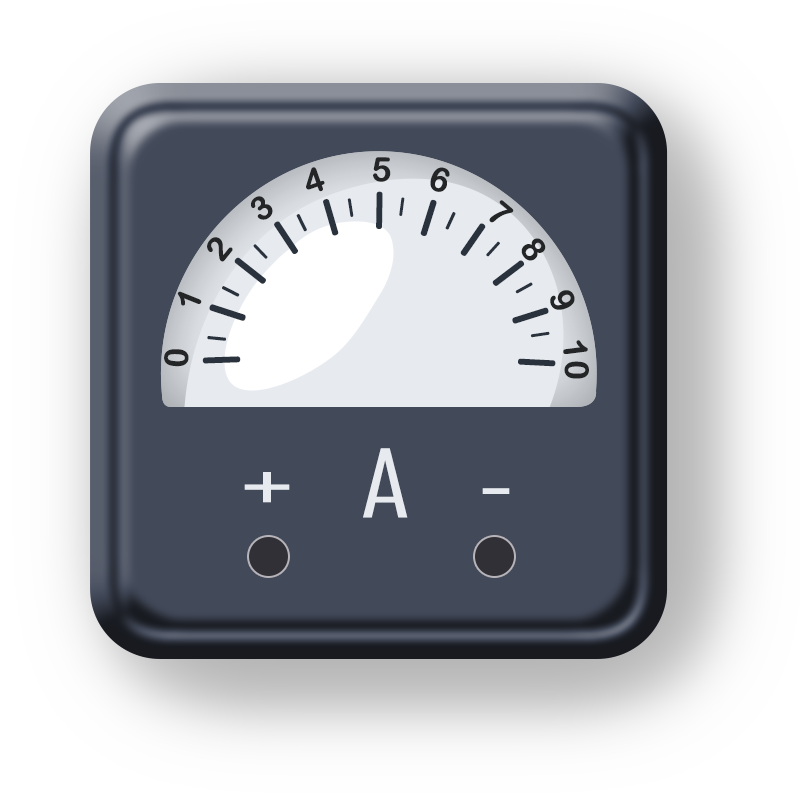
<style>
.page{position:relative;width:800px;height:800px;background:#424959}
.page>*{position:absolute;margin:0}
.t1{font:33px/66px "ArialRoundedMTBold";color:#242526;font-weight:bold}
.t2{font:40px/66px "ArialRoundedMTBold";letter-spacing:0.08em;color:#2a333d;scale:1.44 1}
.t3{font:20px/66px "ArialRoundedMTBold";letter-spacing:0.08em;color:#2a333d;scale:1.44 1}
.t4{font:90px "AgencyFB-Reg";letter-spacing:-0.02em;color:#e7ebf0;scale:1.44 1}
</style>
<div class="page">
<p class="t1" style="left:164px;top:157px;width:425px;height:222px">0    1    2    3    4     5    6     7   8    9   10</p>
<p class="t2" style="left:202px;top:191px;width:354px;height:176px;text-align:justify">|<span class="t3">|</span>|<span class="t3">|</span>|<span class="t3">|</span>|<span class="t3">|</span>|<span class="t3">|</span>|<span class="t3">|</span>|<span class="t3">|</span>|<span class="t3">|</span>|<span class="t3">|</span>|<span class="t3">|</span>|</p>
<p class="t4" style="left:244px;top:448px;width:266px;height:70px">+   A   -</p>
</div>
